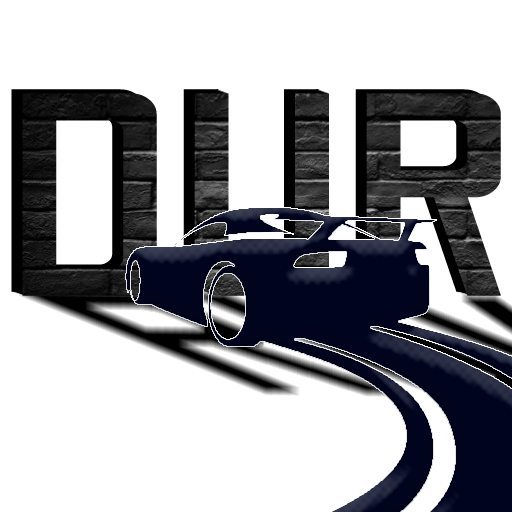
<style>
.page{position:relative;width:512px;height:512px;background:#ffffff}
.page>*{position:absolute;margin:0}
.t1{font:288.6px "OdibeeSans-Regular";scale:1.25 1}
</style>
<div class="page">
<p class="t1" style="left:11px;top:89px;width:479px;height:203px">DUR</p>
<p class="t1" style="left:22px;top:93px;width:479px;height:203px">DUR</p>
</div>
